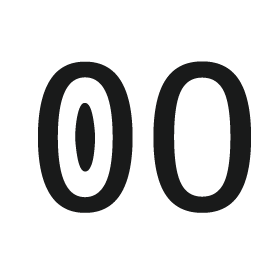
<style>
.page{position:relative;width:280px;height:280px;background:#ffffff}
.page>*{position:absolute;margin:0}
.t1{font:200px "Hack-Regular";letter-spacing:-0.015em;color:#191a1a}
</style>
<div class="page">
<p class="t1" style="left:38px;top:61px;width:213px;height:152px">0O</p>
</div>
